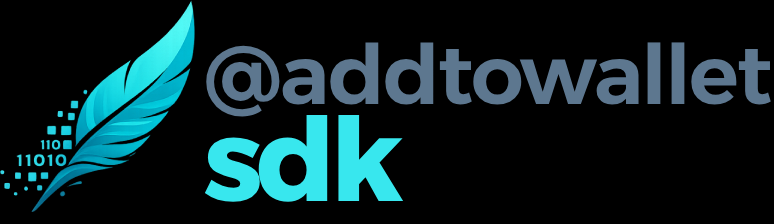
<style>
.page{position:relative;width:774px;height:224px;background:#000000}
.page>*{position:absolute;margin:0}
.t1{font:83px "Alexandria-SemiBold";letter-spacing:-0.022em;color:#5d778f}
.t2{font:116px "Alexandria-Bold";letter-spacing:-0.056em;color:#38e7ee}
</style>
<div class="page">
<p class="t1" style="left:206px;top:42px;width:565px;height:75px">@addtowallet</p>
<p class="t2" style="left:204px;top:114px;width:200px;height:88px">sdk</p>
</div>
